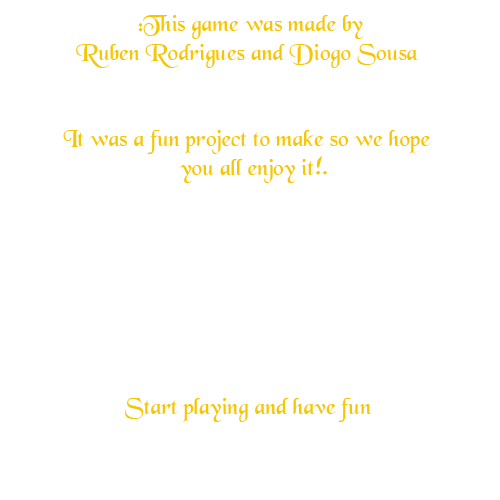
<style>
.page{position:relative;width:500px;height:500px;background:#ffffff}
.page>*{position:absolute;margin:0}
.t1{font:24px "BlackChancery";color:#f6c503}
</style>
<div class="page">
<p class="t1" style="left:63px;top:15px;width:367px;height:168px;text-align:center">This game was made by: <br>Ruben Rodrigues and Diogo Sousa<br><br><br>It was a fun project to make so we hope<br>you all enjoy it</p>
<p class="t1" style="left:316px;top:156px;width:7px;height:19px">!</p>
<p class="t1" style="left:323px;top:171px;width:4px;height:4px">.</p>
<p class="t1" style="left:125px;top:398px;width:246px;height:24px">Start playing and have fun</p>
</div>
